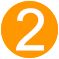
<style>
.page{position:relative;width:59px;height:59px;background:#ff9800}
.page>*{position:absolute;margin:0}
.t1{font:58.3px "ArialMT";color:#ffffff}
</style>
<div class="page">
<p class="t1" style="left:16px;top:8px;width:28px;height:43px">2</p>
</div>
